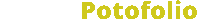
<style>
.page{position:relative;width:198px;height:24px;background:#ffffff}
.page>*{position:absolute;margin:0}
.t1{font:24px "OpenSans-Extrabold";color:#cfc91d;scale:1.05 1}
.t2{font:24px "OpenSans-Extrabold";color:#ffffff;scale:1.05 1}
</style>
<div class="page">
<p class="t1" style="left:0px;top:0px;width:197px;height:24px"><span class="t2">James</span>Potofolio</p>
</div>
